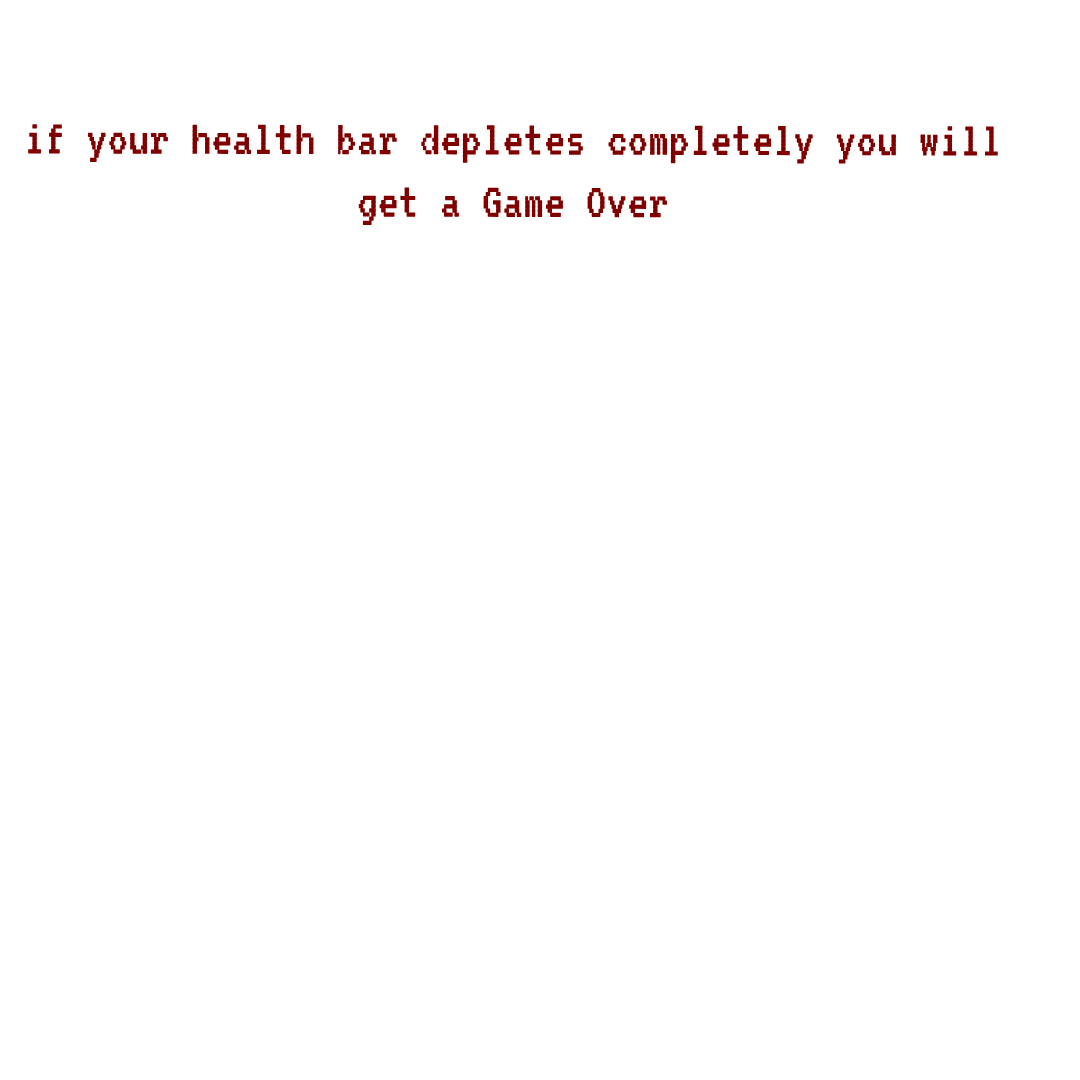
<style>
.page{position:relative;width:1080px;height:1080px;background:#ffffff}
.page>*{position:absolute;margin:0}
.t1{font:52px "VT323-Regular";color:#800000}
.t2{font:52px "VT323-Regular";color:#80b7f7}
</style>
<div class="page">
<p class="t1" style="left:28px;top:124px;width:970px;height:101px;text-align:center"><span class="t2"><br></span>if your health bar depletes completely you will get a Game Over</p>
</div>
